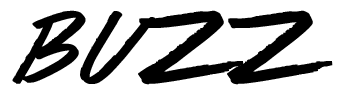
<style>
.page{position:relative;width:349px;height:92px;background:#ffffff}
.page>*{position:absolute;margin:0}
.t1{font:69.4px "ColorsOfAutumn";color:#000000;font-weight:bold}
</style>
<div class="page">
<p class="t1" style="left:12px;top:10px;width:321px;height:75px">BUZZ</p>
</div>
